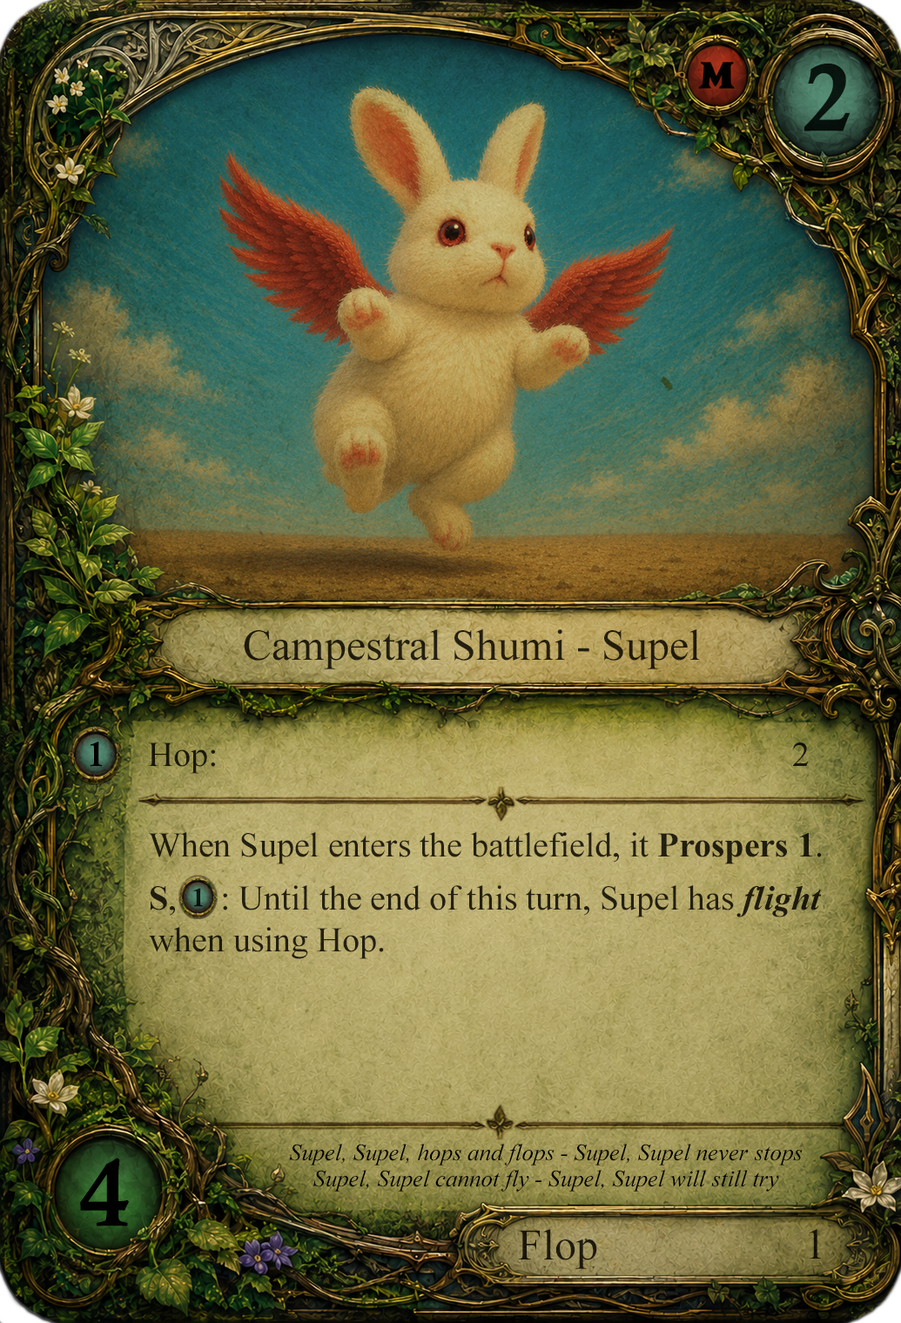
<style>
.page{position:relative;width:901px;height:1323px}
.page>*{position:absolute;margin:0}
.t1{font:95.8px "CalisMTBol";color:#000000}
.t2{font:43.5px "TimesNewRomanPSMT";color:#221d0d}
.t3{font:34.8px "CalisMTBol";color:#000000}
.t4{font:34.8px "TimesNewRomanPSMT";color:#1a1808}
.t5{font:34.8px "TimesNewRomanPSMT";color:#232010}
.t6{font:34.8px "TimesNewRomanPS-BoldMT";color:#232010}
.t7{font:34.8px/3.5px "TimesNewRomanPSMT";color:#221f10}
.t8{font:34.8px/3.5px "TimesNewRomanPS-BoldMT";color:#221f10}
.t9{font:34.8px/3.5px "TimesNewRomanPS-BoldItalicMT";color:#221f10}
.t10{font:34.8px/41.8px "TimesNewRomanPSMT";color:#221f10}
.t11{font:25.5px "CalisMTBol";color:#000000}
.t12{font:23.5px/26.1px "TimesNewRomanPS-ItalicMT";color:#000000}
.t13{font:43.5px "TimesNewRomanPSMT";color:#1c190c}
.t14{font:43.5px "TimesNewRomanPSMT";color:#000000}
</style>
<div class="page">
<p class="t1" style="left:804px;top:64px;width:47px;height:67px;opacity:0.9">2</p>
<p class="t2" style="left:244px;top:629px;width:456px;height:41px">Campestral Shumi - Supel</p>
<p class="t3" style="left:90px;top:742px;width:13px;height:25px">1</p>
<p class="t4" style="left:148px;top:743px;width:661px;height:31px">Hop:                                                                  2</p>
<p class="t5" style="left:149px;top:832px;width:673px;height:33px">When Supel enters the battlefield, it <span class="t6">Prospers 1</span>.</p>
<p class="t7" style="left:149px;top:885px;width:673px;height:74px"><span class="t8">S</span>,     : Until the end of this turn, Supel has <span class="t9">flight <br></span><span class="t10">when using Hop.</span></p>
<p class="t11" style="left:193px;top:888px;width:10px;height:19px;opacity:0.9">1</p>
<p class="t12" style="left:289px;top:1144px;width:514px;height:48px;text-align:center">Supel, Supel, hops and flops - Supel, Supel never stops<br>Supel, Supel cannot fly - Supel, Supel will still try</p>
<p class="t1" style="left:80px;top:1158px;width:49px;height:69px">4</p>
<p class="t13" style="left:518px;top:1229px;width:79px;height:40px">Flop</p>
<p class="t14" style="left:810px;top:1229px;width:11px;height:30px;opacity:0.9">1</p>
</div>
